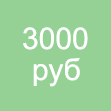
<style>
.page{position:relative;width:111px;height:111px;background:#95d195}
.page>*{position:absolute;margin:0}
.t1{font:30px "ArialMT";color:#ffffff}
</style>
<div class="page">
<p class="t1" style="left:23px;top:27px;width:65px;height:23px">3000</p>
<p class="t1" style="left:33px;top:58px;width:47px;height:29px">руб</p>
</div>
